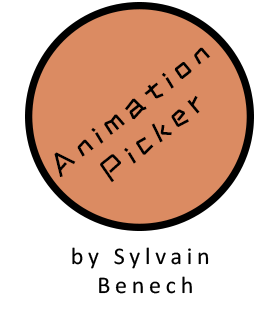
<style>
.page{position:relative;width:280px;height:330px;background:#ffffff}
.page>*{position:absolute;margin:0}
.t1{font:29.7px "ZCOOLKuaiLe-Regular";letter-spacing:0.2em;color:#000000}
.t2{font:24px "Calibri";letter-spacing:0.2em;color:#000000}
</style>
<div class="page">
<p class="t1" style="left:54px;top:47px;width:157px;height:136px;text-align:center;rotate:-38deg">Animation<br>Picker</p>
<p class="t2" style="left:72px;top:247px;width:137px;height:47px;text-align:center">by Sylvain<br> Benech</p>
</div>
